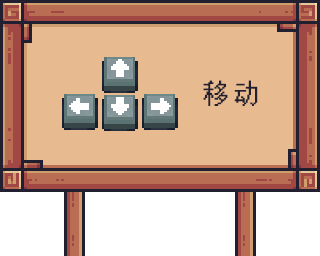
<style>
.page{position:relative;width:320px;height:256px;background:#e7bb8f}
.page>*{position:absolute;margin:0}
.t1{font:25px "FZXS16--GB1-0";letter-spacing:0.22em;color:#211f30;font-weight:bold}
</style>
<div class="page">
<p class="t1" style="left:203px;top:80px;width:55px;height:26px">移动</p>
</div>
